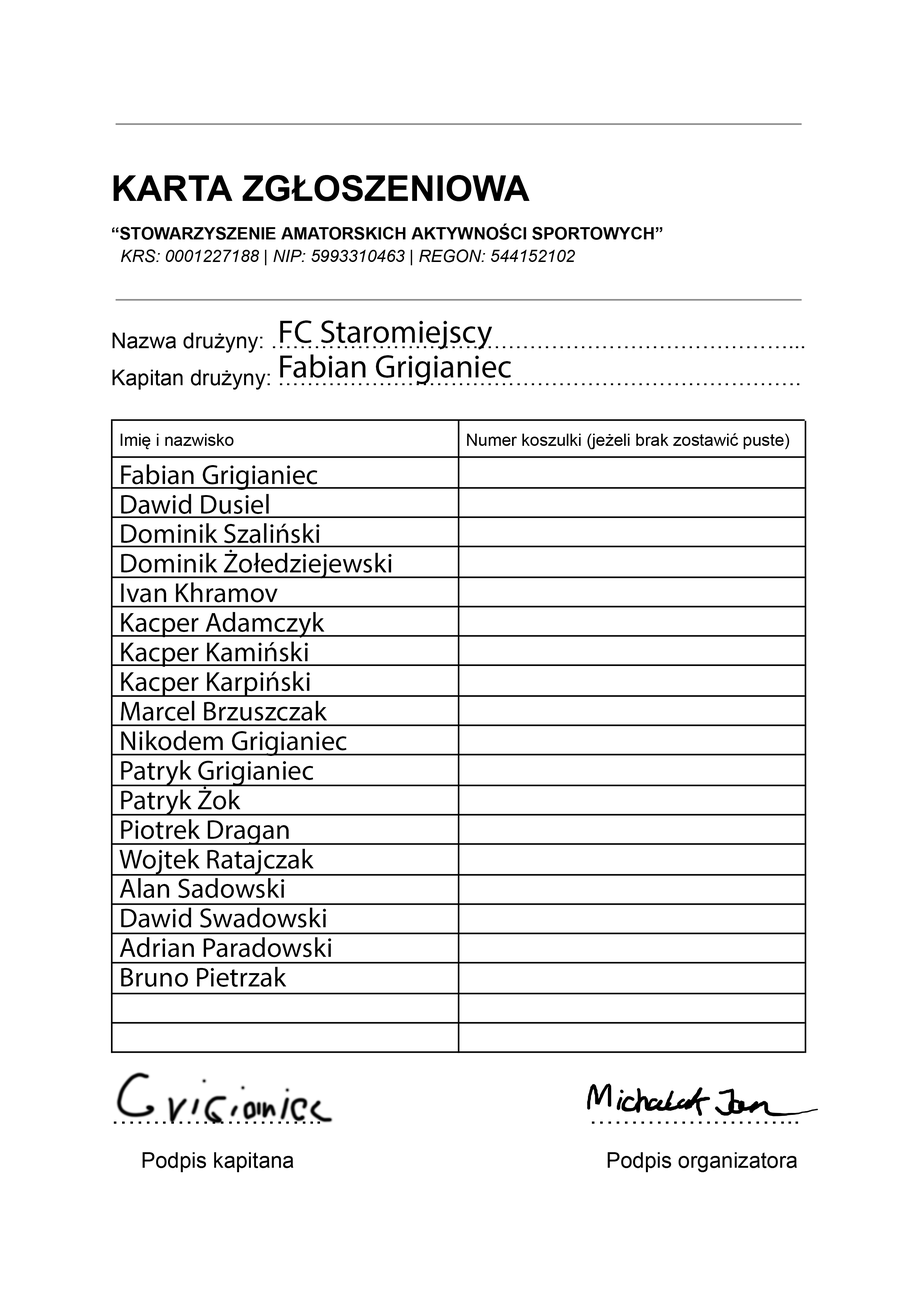
<style>
.page{position:relative;width:918px;height:1298px;background:#ffffff}
.page>*{position:absolute;margin:0}
.t1{font:27.7px/29.6px "MyriadPro-Regular";color:#000000}
</style>
<div class="page">
<p class="t1" style="left:120px;top:465px;width:272px;height:522px">Fabian Grigianiec<br>Dawid Dusiel<br>Dominik Szaliński<br>Dominik Żołedziejewski <br>Ivan Khramov<br>Kacper Adamczyk<br>Kacper Kamiński<br>Kacper Karpiński<br>Marcel Brzuszczak<br>Nikodem Grigianiec <br>Patryk Grigianiec<br>Patryk Żok<br>Piotrek Dragan <br>Wojtek Ratajczak <br>Alan Sadowski <br>Dawid Swadowski<br>Adrian Paradowski <br>Bruno Pietrzak</p>
</div>
